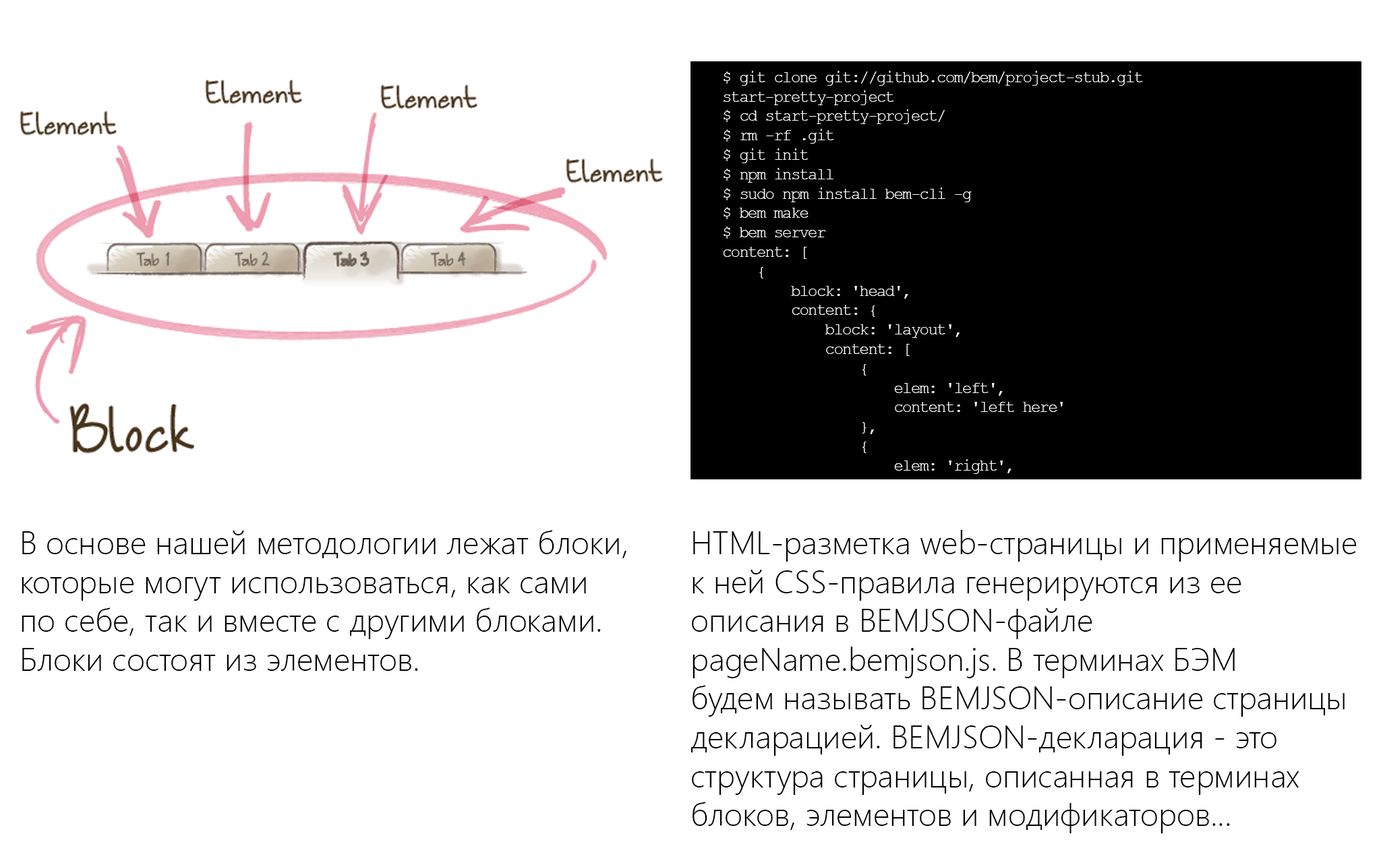
<style>
.page{position:relative;width:1381px;height:863px;background:#ffffff}
.page>*{position:absolute;margin:0}
.t1{font:16.2px "CourierNewPSMT";letter-spacing:-0.07em;color:#fffefe}
.t2{font:32.4px "SegoeUI-Light";color:#000000}
</style>
<div class="page">
<p class="t1" style="left:723px;top:71px;width:420px;height:403px">$ git clone git://github.com/bem/project-stub.git start-pretty-project<br>$ cd start-pretty-project/<br>$ rm -rf .git<br>$ git init<br>$ npm install<br>$ sudo npm install bem-cli -g<br>$ bem make<br>$ bem server<br>content: [<br>    {<br>        block: 'head',<br>        content: {<br>            block: 'layout',<br>            content: [<br>                {<br>                    elem: 'left',<br>                    content: 'left here'<br>                },<br>                {<br>                    elem: 'right',<br>                    content: 'right here'<br>                }<br>            ]<br>        }<br>    }<br>]mm</p>
<p class="t2" style="left:22px;top:530px;width:605px;height:141px">В основе нашей методологии лежат блоки,<br>которые могут использоваться, как сами<br>по себе, так и вместе с другими блоками.<br>Блоки состоят из элементов.</p>
<p class="t2" style="left:691px;top:530px;width:666px;height:304px">HTML-разметка web-страницы и применяемые<br>к ней CSS-правила генерируются из ее <br>описания в BEMJSON-файле <br>pageName.bemjson.js. В терминах БЭМ<br>будем называть BEMJSON-описание страницы<br>декларацией. BEMJSON-декларация - это <br>структура страницы, описанная в терминах <br>блоков, элементов и модификаторов...</p>
</div>
